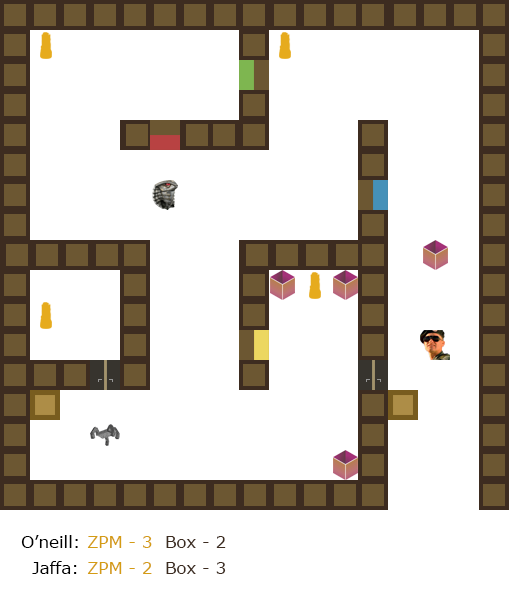
<style>
.page{position:relative;width:509px;height:600px;background:#ffffff}
.page>*{position:absolute;margin:0}
.t1{font:16.7px "Verdana";color:#000000}
.t2{font:16.7px "Verdana";color:#d49c14}
.t3{font:16.7px "Verdana";color:#3d2c20}
</style>
<div class="page">
<p class="t1" style="left:21px;top:535px;width:57px;height:13px">O’neill:</p>
<p class="t2" style="left:87px;top:536px;width:65px;height:12px">ZPM - 3</p>
<p class="t3" style="left:166px;top:536px;width:60px;height:12px">Box - 2</p>
<p class="t1" style="left:32px;top:561px;width:45px;height:13px">Jaffa:</p>
<p class="t2" style="left:87px;top:562px;width:65px;height:12px">ZPM - 2</p>
<p class="t3" style="left:166px;top:562px;width:60px;height:12px">Box - 3</p>
</div>
